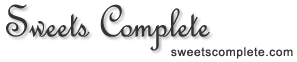
<style>
.page{position:relative;width:297px;height:62px;background:#ffffff}
.page>*{position:absolute;margin:0}
.t1{font:48px "FrenchScriptMT";color:#333333;scale:0.9 1}
.t2{font:12px "ArialMT";letter-spacing:0.05em;color:#333333}
</style>
<div class="page">
<p class="t1" style="left:6px;top:4px;width:204px;height:47px">Sweets Complete</p>
<p class="t2" style="left:171px;top:47px;width:122px;height:12px">sweetscomplete.com</p>
</div>
